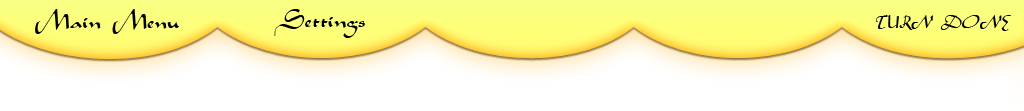
<style>
.page{position:relative;width:1024px;height:111px;background:#ffffff}
.page>*{position:absolute;margin:0}
.t1{font:28px "Aladdin";color:#000000}
.t2{font:18px "Aladdin";color:#000000}
</style>
<div class="page">
<p class="t1" style="left:35px;top:9px;width:144px;height:25px">Main Menu</p>
<p class="t1" style="left:274px;top:9px;width:91px;height:29px">Settings</p>
<p class="t2" style="left:876px;top:15px;width:135px;height:16px">TURN DONE</p>
</div>
